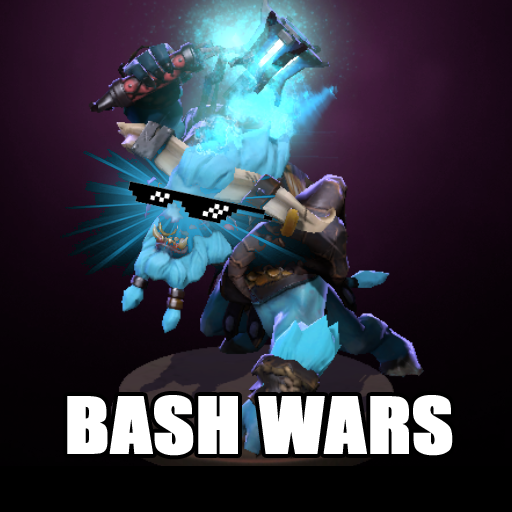
<style>
.page{position:relative;width:512px;height:512px}
.page>*{position:absolute;margin:0}
.t1{font:72px "Impact";color:#ffffff;font-weight:bold;scale:1.1 1}
</style>
<div class="page">
<p class="t1" style="left:67px;top:395px;width:386px;height:61px">BASH WARS</p>
</div>
